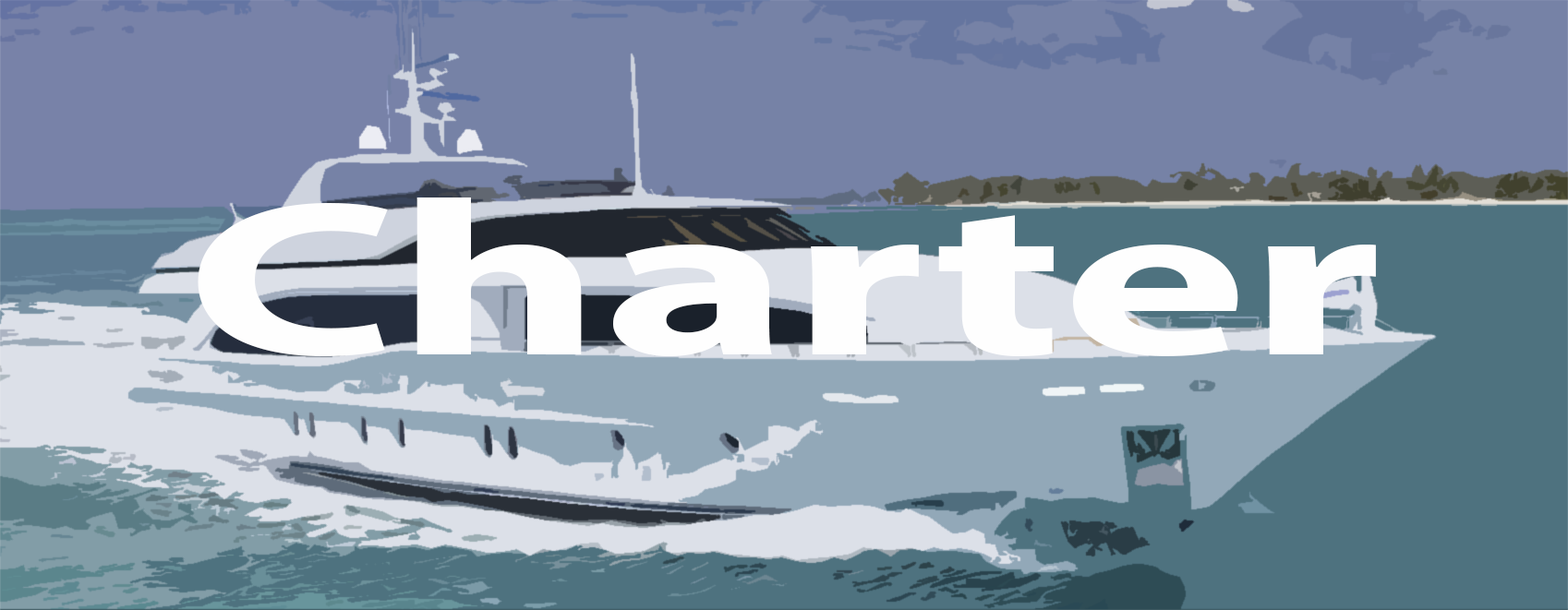
<style>
.page{position:relative;width:1568px;height:610px}
.page>*{position:absolute;margin:0}
.t1{font:221.6px "MyriadPro-Bold";color:#fefefe;scale:1.6 1}
</style>
<div class="page">
<p class="t1" style="left:198px;top:198px;width:1178px;height:159px">Charter</p>
</div>
